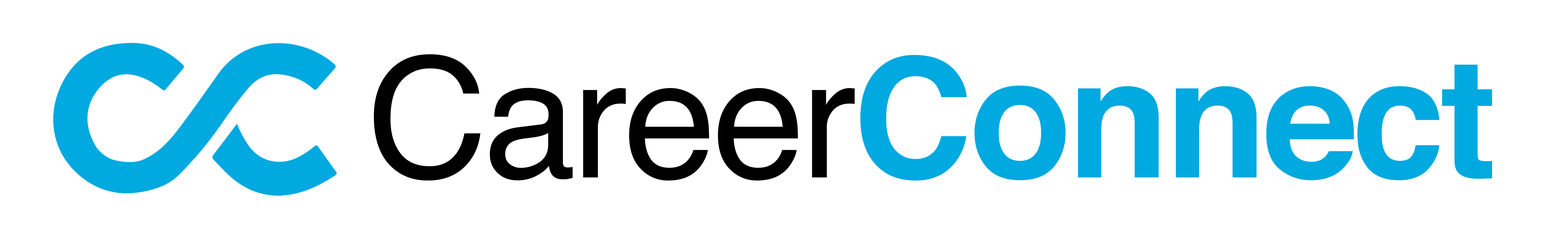
<style>
.page{position:relative;width:1568px;height:243px;background:#ffffff}
.page>*{position:absolute;margin:0}
.t1{font:167.2px "Helvetica-Bold";letter-spacing:-0.025em;color:#00a9e0}
.t2{font:167.2px "Helvetica";letter-spacing:-0.025em;color:#000000}
</style>
<div class="page">
<p class="t1" style="left:374px;top:54px;width:1118px;height:127px"><span class="t2">Career</span>Connect</p>
</div>
